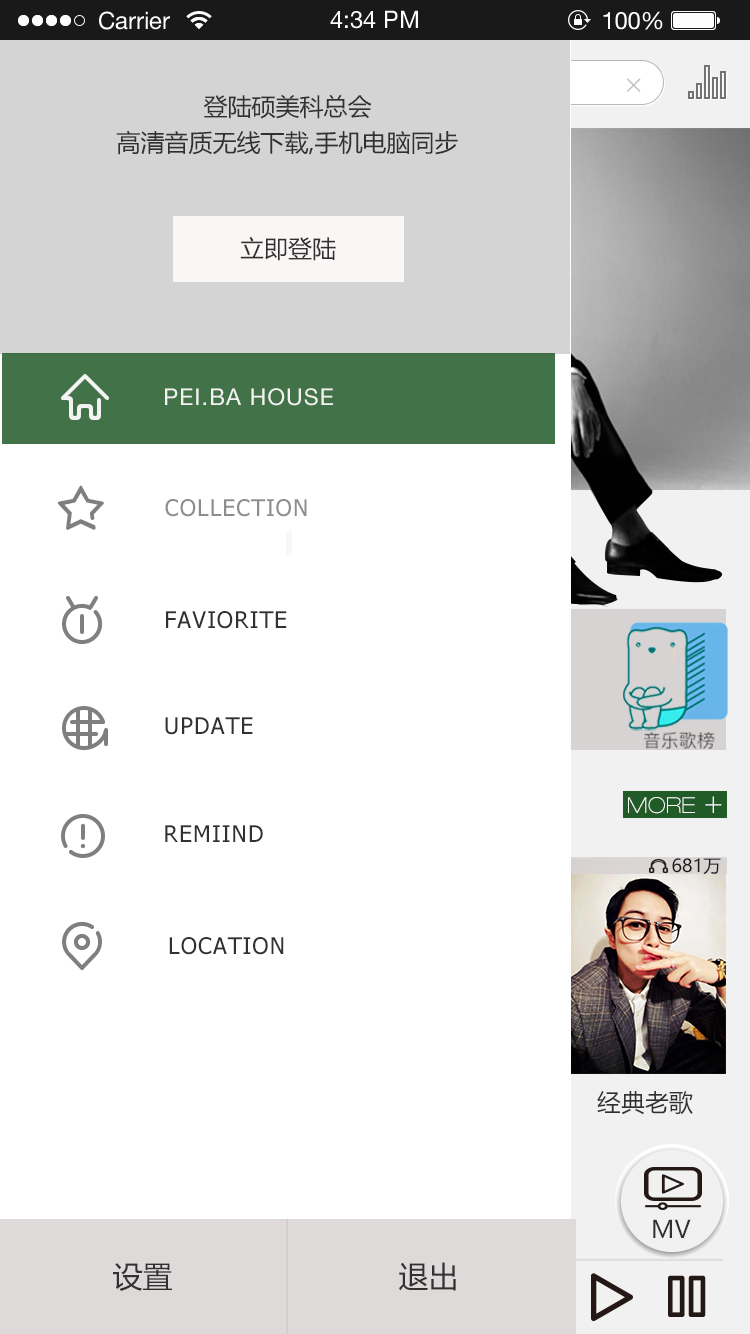
<style>
.page{position:relative;width:750px;height:1334px;background:#ffffff}
.page>*{position:absolute;margin:0}
.t1{font:24px/36px "MicrosoftYaHei";color:#313131}
.t2{font:24px "MicrosoftYaHei";color:#313131}
.t3{font:23px "HelveticaNeueLTPro-Roman";letter-spacing:0.05em;color:#f3f2f1}
.t4{font:23px "Tahoma";letter-spacing:0.05em;color:#8d8d8d}
.t5{font:23px "Tahoma";letter-spacing:0.05em;color:#313131}
.t6{font:30px "MicrosoftYaHei";color:#313131}
</style>
<div class="page">
<p class="t1" style="left:116px;top:94px;width:342px;height:61px;text-align:center">登陆硕美科总会<br>高清音质无线下载,手机电脑同步</p>
<p class="t2" style="left:240px;top:236px;width:96px;height:25px">立即登陆</p>
<p class="t3" style="left:165px;top:388px;width:168px;height:18px">PEI.BA HOUSE</p>
<p class="t4" style="left:165px;top:499px;width:142px;height:18px">COLLECTION</p>
<p class="t5" style="left:166px;top:611px;width:121px;height:18px">FAVIORITE</p>
<p class="t5" style="left:165px;top:717px;width:88px;height:18px">UPDATE</p>
<p class="t5" style="left:165px;top:825px;width:98px;height:17px">REMIIND</p>
<p class="t5" style="left:169px;top:937px;width:115px;height:18px">LOCATION</p>
<p class="t6" style="left:113px;top:1263px;width:59px;height:28px">设置</p>
<p class="t6" style="left:399px;top:1262px;width:57px;height:29px">退出</p>
</div>
